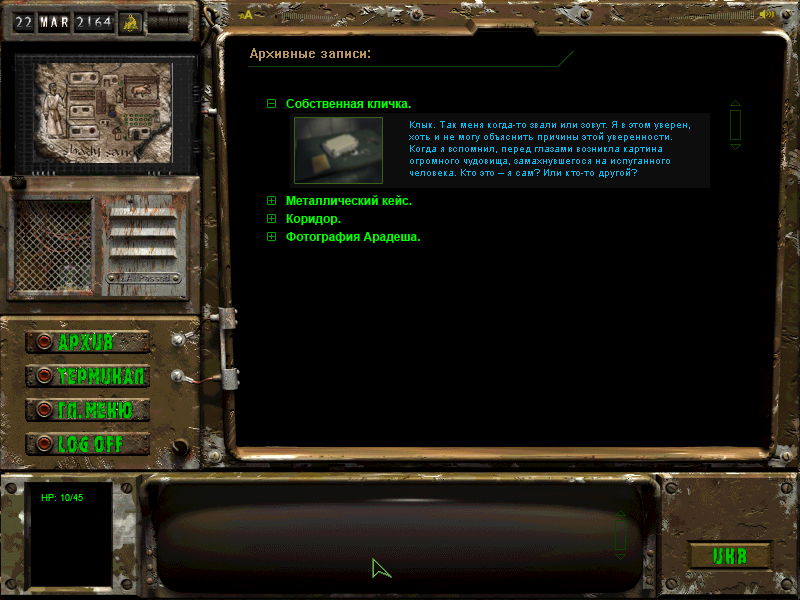
<style>
.page{position:relative;width:800px;height:600px;background:#000000}
.page>*{position:absolute;margin:0}
.t1{font:12px "Arial-BoldMT";color:#00ff00}
.t2{font:10px "ArialMT";color:#00bff3}
</style>
<div class="page">
<p class="t1" style="left:272px;top:99px;width:139px;height:9px">-   Собственная кличка.</p>
<p class="t2" style="left:409px;top:121px;width:281px;height:57px">Клык. Так меня когда-то звали или зовут. Я в этом уверен, <br>хоть и не могу объяснить причины этой уверенности. <br>Когда я вспомнил, перед глазами возникла картина <br>огромного чудовища, замахнувшегося на испуганного <br>человека. Кто это – я сам? Или кто-то другой?</p>
<p class="t1" style="left:269px;top:195px;width:143px;height:10px">+   Металлический кейс.</p>
<p class="t1" style="left:269px;top:214px;width:72px;height:11px">+   Коридор.</p>
<p class="t1" style="left:269px;top:232px;width:151px;height:11px">+   Фотография Арадеша.</p>
</div>
